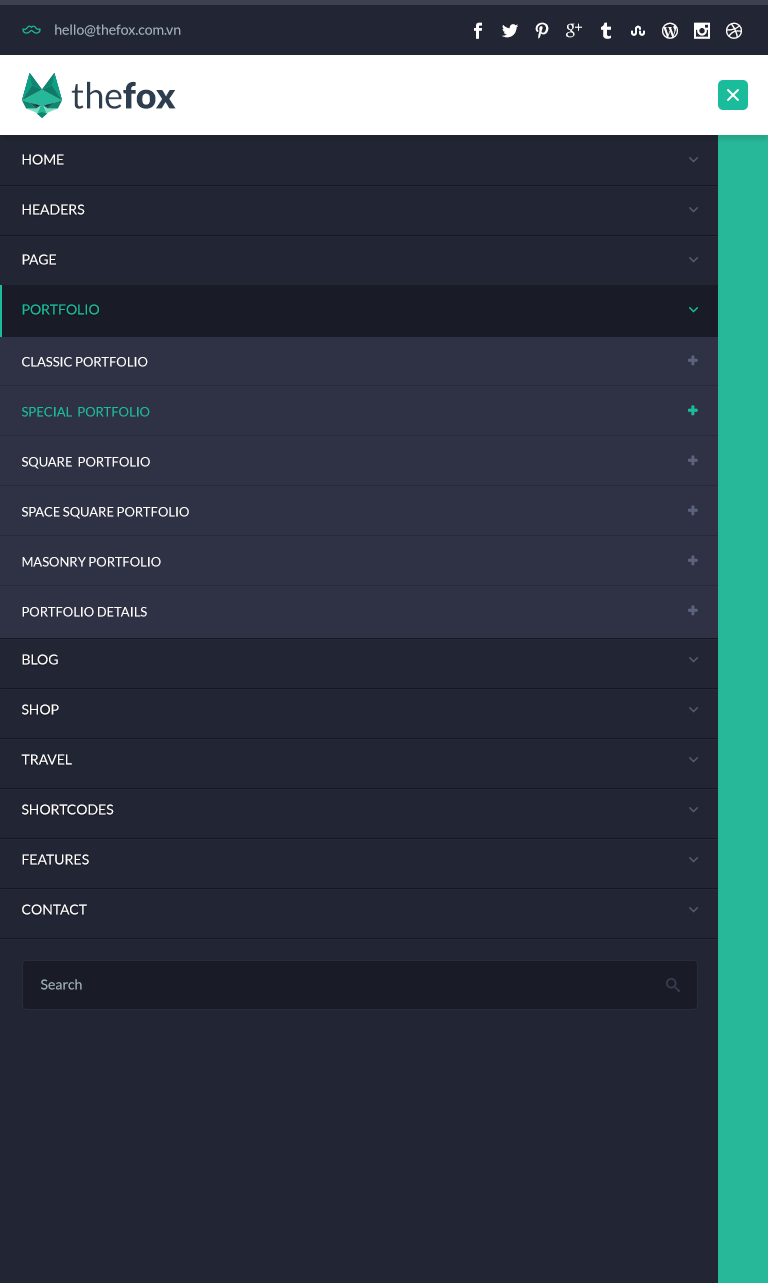
<style>
.page{position:relative;width:768px;height:1283px;background:#222533}
.page>*{position:absolute;margin:0}
.t1{font:14px "Lato-Regular";color:#a1b1bc}
.t2{font:36px "Lato-Regular";color:#2c3e50}
.t3{font:36px "Lato-Black";color:#2c3e50}
.t4{font:14px/50px "Lato-Regular";color:#ffffff;text-transform:uppercase}
.t5{font:14px/50px "Lato-Regular";color:#1abc9c;text-transform:uppercase}
.t6{font:13px/50px "Lato-Regular";color:#ffffff;text-transform:uppercase}
.t7{font:13px/50px "Lato-Regular";color:#1abc9c;text-transform:uppercase}
</style>
<div class="page">
<p class="t1" style="left:55px;top:24px;width:126px;height:13px">hello@thefox.com.vn</p>
<p class="t2" style="left:71px;top:81px;width:105px;height:28px">the<span class="t3">fox</span></p>
<p class="t4" style="left:21px;top:154px;width:93px;height:761px">Home<br>HEADERS<br>Page<br><span class="t5">Portfolio<br></span><br><br><br><br><br><br>Blog<br>shop<br>travel<br>shortcodes<br>features<br>contact</p>
<p class="t6" style="left:22px;top:357px;width:167px;height:260px">CLASSIC PORTFOLIO<br><span class="t7">SPECIAL  PORTFOLIO<br></span>SQUARE  PORTFOLIO<br>SPACE SQUARE PORTFOLIO<br>MASONRY PORTFOLIO<br>PORTFOLIO DETAILS</p>
<p class="t1" style="left:41px;top:979px;width:41px;height:11px">Search</p>
</div>
